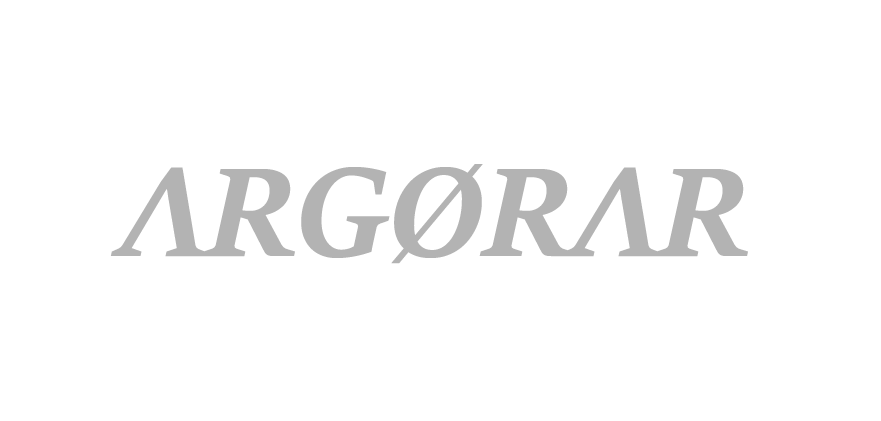
<style>
.page{position:relative;width:881px;height:421px;background:#ffffff}
.page>*{position:absolute;margin:0}
.t1{font:140px "SitkaHeading-BoldItalic";color:#b3b3b3}
</style>
<div class="page">
<p class="t1" style="left:110px;top:164px;width:638px;height:100px">ΛRGØRΛR</p>
</div>
